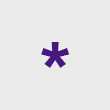
<style>
.page{position:relative;width:110px;height:110px;background:#ebebeb}
.page>*{position:absolute;margin:0}
.t1{font:72px "Futura-Medium";color:#491780}
</style>
<div class="page">
<p class="t1" style="left:41px;top:42px;width:29px;height:26px">*</p>
</div>
